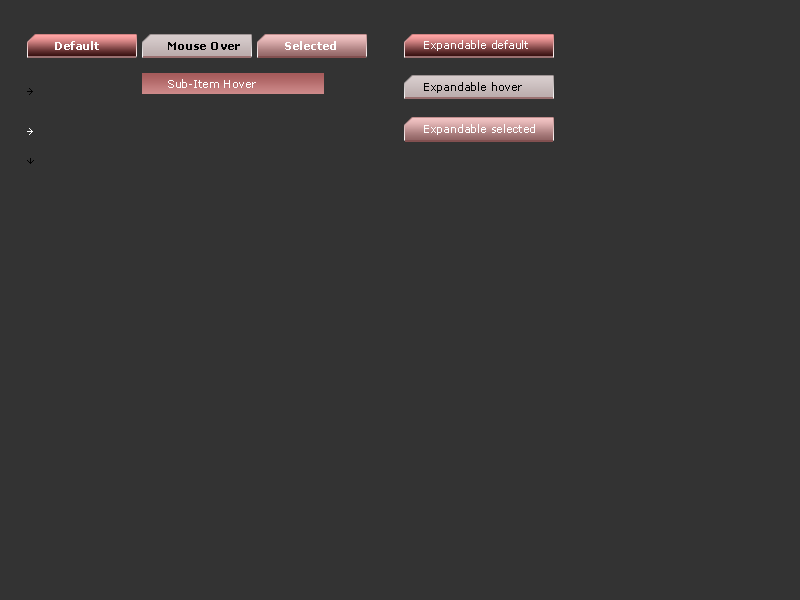
<style>
.page{position:relative;width:800px;height:600px;background:#333333}
.page>*{position:absolute;margin:0}
.t1{font:11px "Verdana-Bold";color:#ffffff}
.t2{font:11px "Verdana";color:#ffffff}
.t3{font:11px "Verdana-Bold";color:#000000}
.t4{font:11px "Verdana";color:#000000}
</style>
<div class="page">
<p class="t1" style="left:55px;top:41px;width:44px;height:9px">Default</p>
<p class="t1" style="left:285px;top:41px;width:51px;height:9px">Selected</p>
<p class="t2" style="left:424px;top:40px;width:104px;height:11px">Expandable default</p>
<p class="t3" style="left:168px;top:42px;width:72px;height:8px">Mouse Over</p>
<p class="t2" style="left:168px;top:79px;width:88px;height:9px">Sub-Item Hover</p>
<p class="t4" style="left:424px;top:82px;width:98px;height:11px">Expandable hover</p>
<p class="t2" style="left:424px;top:124px;width:111px;height:11px">Expandable selected</p>
</div>
